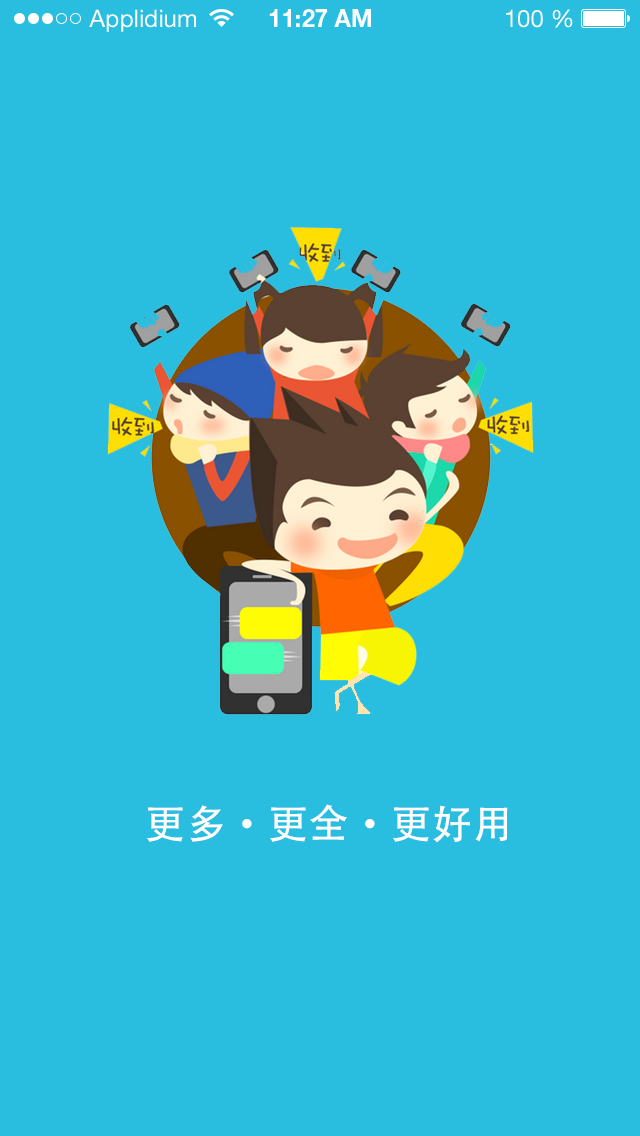
<style>
.page{position:relative;width:640px;height:1136px;background:#29bde0}
.page>*{position:absolute;margin:0}
.t1{font:40px "AdobeHeitiStd-Regular";letter-spacing:0.025em;color:#ffffff}
</style>
<div class="page">
<p class="t1" style="left:147px;top:804px;width:361px;height:39px">更多·更全·更好用</p>
</div>
